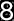
<style>
.page{position:relative;width:14px;height:21px;background:#000000}
.page>*{position:absolute;margin:0}
.t1{font:26px "LeelawadeeUI";color:#ffffff;scale:1.1 1}
</style>
<div class="page">
<p class="t1" style="left:0px;top:1px;width:13px;height:20px">8</p>
</div>
